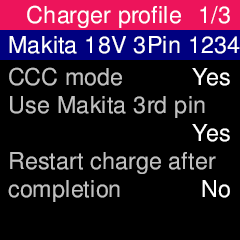
<style>
.page{position:relative;width:240px;height:240px;background:#000000}
.page>*{position:absolute;margin:0}
.t1{font:23.3px "FreeSans";letter-spacing:0.01em;color:#ffffff}
.t2{font:23.3px "FreeSans";letter-spacing:0.01em;color:#c0c0c0}
</style>
<div class="page">
<p class="t1" style="left:27px;top:5px;width:154px;height:23px">Charger profile</p>
<p class="t1" style="left:200px;top:5px;width:30px;height:19px">1/3</p>
<p class="t1" style="left:9px;top:36px;width:231px;height:18px">Makita 18V 3Pin 1234</p>
<p class="t2" style="left:8px;top:67px;width:208px;height:135px">CCC mode<br>Use Makita 3rd pin<br><br>Restart charge after<br>completion</p>
<p class="t1" style="left:192px;top:68px;width:38px;height:130px;text-align:right">Yes<br><br>Yes<br><br>No</p>
</div>
